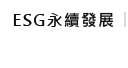
<style>
.page{position:relative;width:128px;height:68px;background:#ffffff}
.page>*{position:absolute;margin:0}
.t1{font:16px "MicrosoftJhengHeiBold";letter-spacing:0.075em;color:#0f0f0f}
</style>
<div class="page">
<p class="t1" style="left:13px;top:12px;width:101px;height:15px">ESG永續發展</p>
</div>
